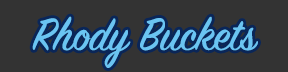
<style>
.page{position:relative;width:288px;height:72px;background:#333333}
.page>*{position:absolute;margin:0}
.t1{font:50px "SignPainter-HouseScript";color:#6ac4f2}
</style>
<div class="page">
<p class="t1" style="left:32px;top:16px;width:226px;height:52px">Rhody Buckets</p>
</div>
